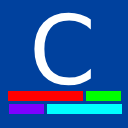
<style>
.page{position:relative;width:128px;height:128px;background:#00419e}
.page>*{position:absolute;margin:0}
.t1{font:96px "DejaVuSans";color:#ffffff}
</style>
<div class="page">
<p class="t1" style="left:34px;top:12px;width:57px;height:74px">C</p>
</div>
